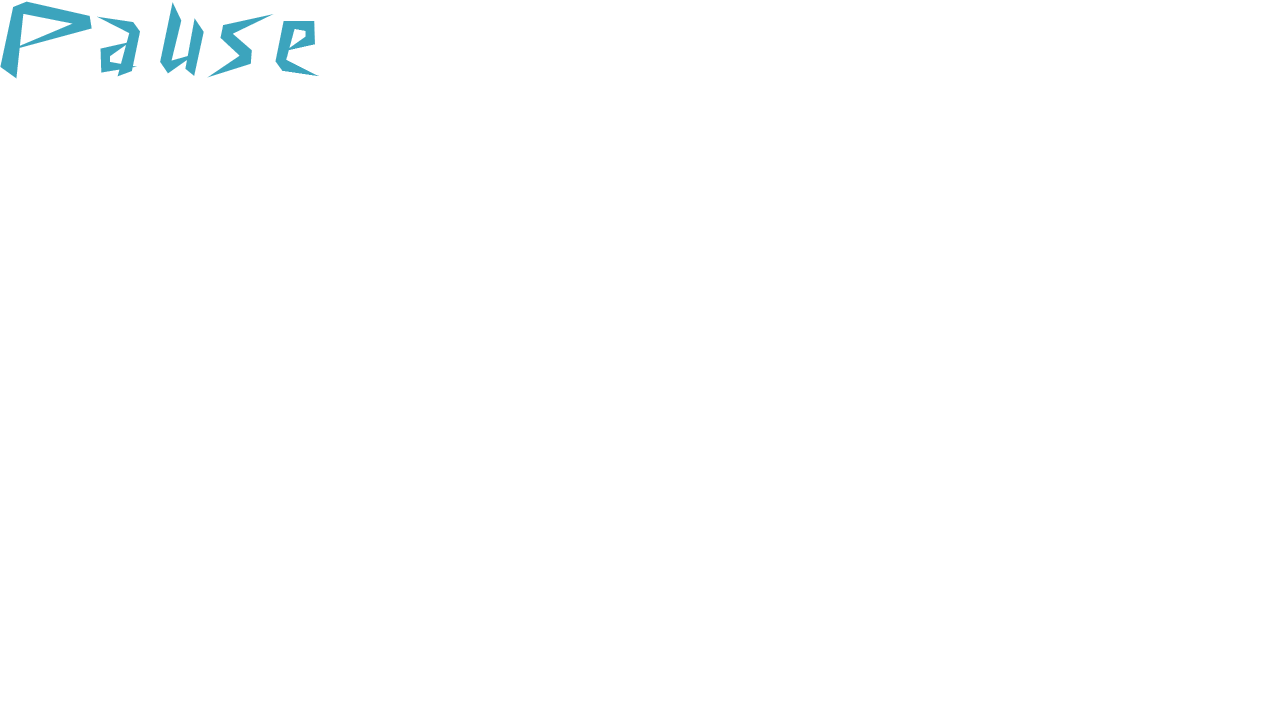
<style>
.page{position:relative;width:1280px;height:720px;background:#ffffff}
.page>*{position:absolute;margin:0}
.t1{font:100px "CyberwayRiders";color:#3ca4bd}
</style>
<div class="page">
<p class="t1" style="left:0px;top:1px;width:319px;height:78px">P a u s e</p>
</div>
